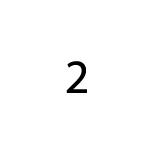
<style>
.page{position:relative;width:150px;height:150px;background:#ffffff}
.page>*{position:absolute;margin:0}
.t1{font:48px "MyriadPro-Regular";color:#000000}
</style>
<div class="page">
<p class="t1" style="left:66px;top:61px;width:21px;height:32px">2</p>
</div>
